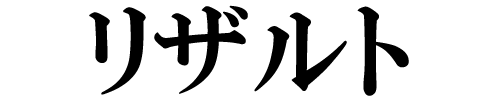
<style>
.page{position:relative;width:500px;height:100px;background:#ffffff}
.page>*{position:absolute;margin:0}
.t1{font:100.1px "HGPMinchoE";color:#000000;font-weight:bold}
</style>
<div class="page">
<p class="t1" style="left:89px;top:5px;width:320px;height:91px">リザルト</p>
</div>
